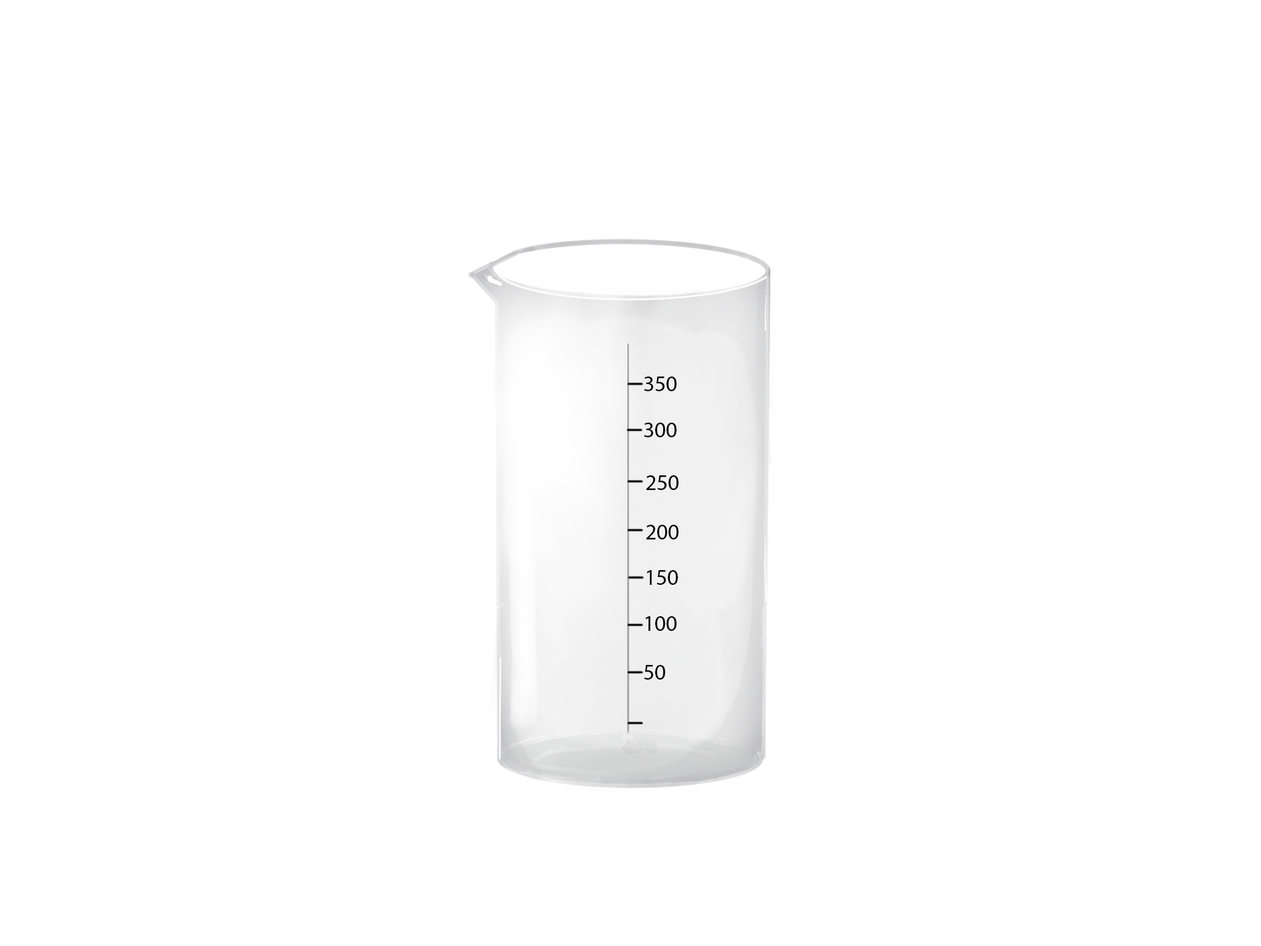
<style>
.page{position:relative;width:1261px;height:946px;background:#ffffff}
.page>*{position:absolute;margin:0}
.t1{font:22.2px "MyriadPro-Regular";color:#000000}
</style>
<div class="page">
<p class="t1" style="left:644px;top:376px;width:33px;height:15px">350</p>
<p class="t1" style="left:644px;top:422px;width:33px;height:15px">300</p>
<p class="t1" style="left:646px;top:475px;width:33px;height:15px">250</p>
<p class="t1" style="left:646px;top:524px;width:33px;height:15px">200</p>
<p class="t1" style="left:647px;top:570px;width:31px;height:15px">150</p>
<p class="t1" style="left:645px;top:616px;width:32px;height:15px">100</p>
<p class="t1" style="left:644px;top:665px;width:21px;height:14px">50</p>
</div>
